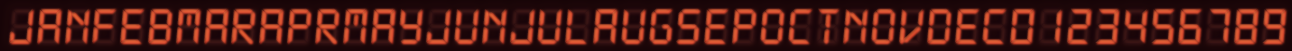
<style>
.page{position:relative;width:1292px;height:51px}
.page>*{position:absolute;margin:0}
.t1{font:54px "DS-Digital-Italic";letter-spacing:0.025em}
.t2{font:54px "DS-Digital-Italic";letter-spacing:0.025em;color:#cc6633}
.t3{font:54px "DS-Digital-Italic";letter-spacing:0.28em;color:#cc6633}
</style>
<div class="page">
<p class="t1" style="left:9px;top:8px;width:1276px;height:35px">8888888888888888888888888888888888888888888888</p>
<p class="t2" style="left:9px;top:8px;width:1277px;height:35px;opacity:0.58">janfebmaraprmayjunjulaugsepoctnovdec<span class="t3">0</span>123456789</p>
<p class="t2" style="left:9px;top:8px;width:1277px;height:35px;opacity:0.96">janfebmaraprmayjunjulaugsepoctnovdec<span class="t3">0</span>123456789</p>
</div>
